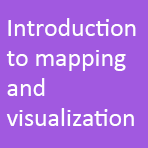
<style>
.page{position:relative;width:148px;height:148px;background:#a159e0}
.page>*{position:absolute;margin:0}
.t1{font:10.8px/30px "Calibri";color:#ffffff}
</style>
<div class="page">
<p class="t1" style="left:6px;top:18px;width:130px;height:108px">Introduction<br>to mapping<br>and<br>visualization</p>
</div>
